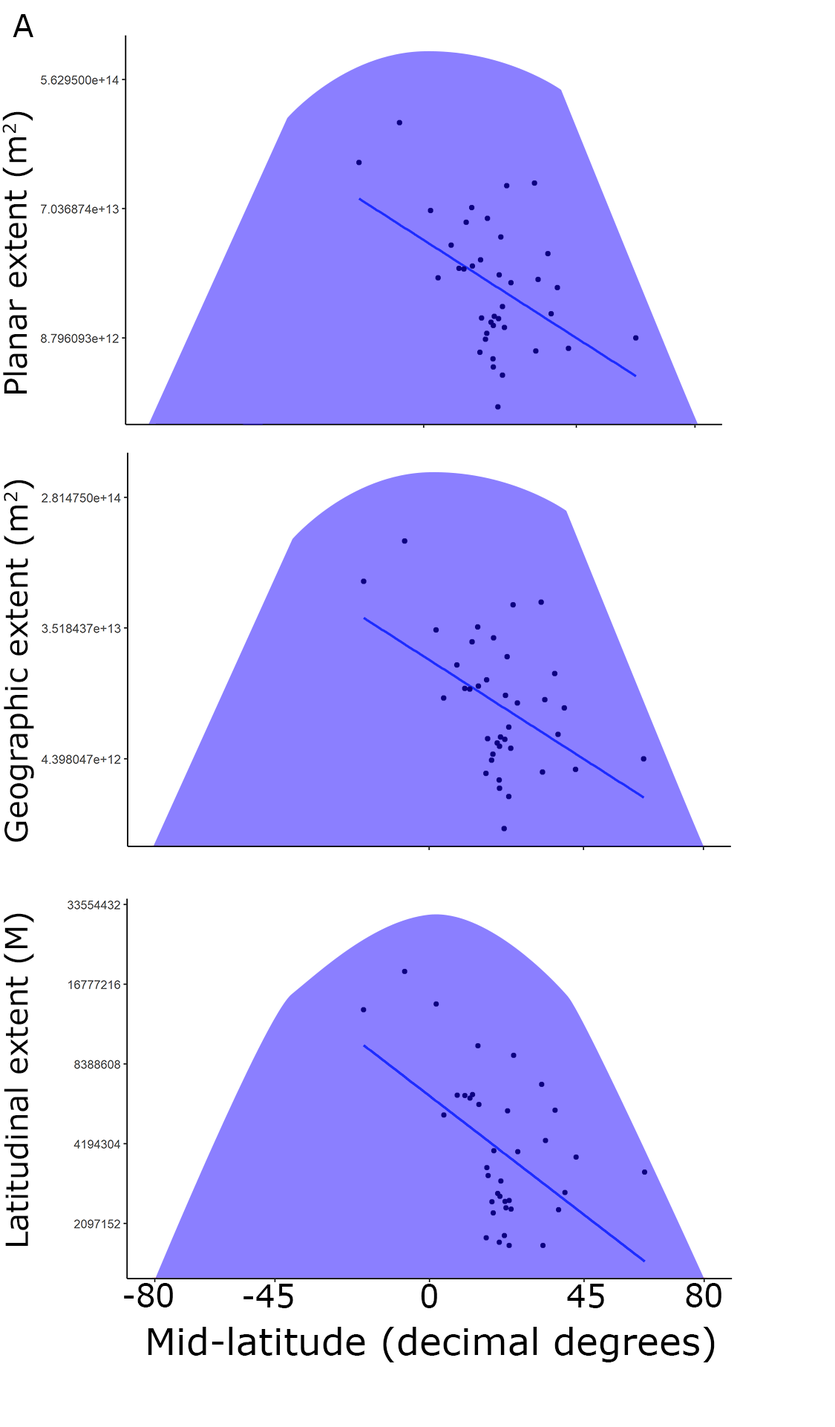
<style>
.page{position:relative;width:835px;height:1427px;background:#ffffff}
.page>*{position:absolute;margin:0}
.t1{font:30.9px "Verdana";color:#000000}
.t2{font:37.1px "Verdana";color:#000000}
</style>
<div class="page">
<p class="t1" style="left:13px;top:14px;width:20px;height:23px">A</p>
<p class="t1" style="left:2px;top:111px;width:31px;height:283px;rotate:-90deg">Planar extent (m2)</p>
<p class="t1" style="left:4px;top:480px;width:30px;height:362px;rotate:-90deg">Geographic extent (m2)</p>
<p class="t1" style="left:4px;top:913px;width:30px;height:333px;rotate:-90deg">Latitudinal extent (M)</p>
<p class="t1" style="left:124px;top:1283px;width:49px;height:25px">-80</p>
<p class="t1" style="left:244px;top:1284px;width:49px;height:24px">-45</p>
<p class="t1" style="left:421px;top:1284px;width:16px;height:24px">0</p>
<p class="t1" style="left:567px;top:1284px;width:37px;height:24px">45</p>
<p class="t1" style="left:686px;top:1283px;width:36px;height:25px">80</p>
<p class="t2" style="left:148px;top:1327px;width:567px;height:36px">Mid-latitude (decimal degrees)</p>
</div>
